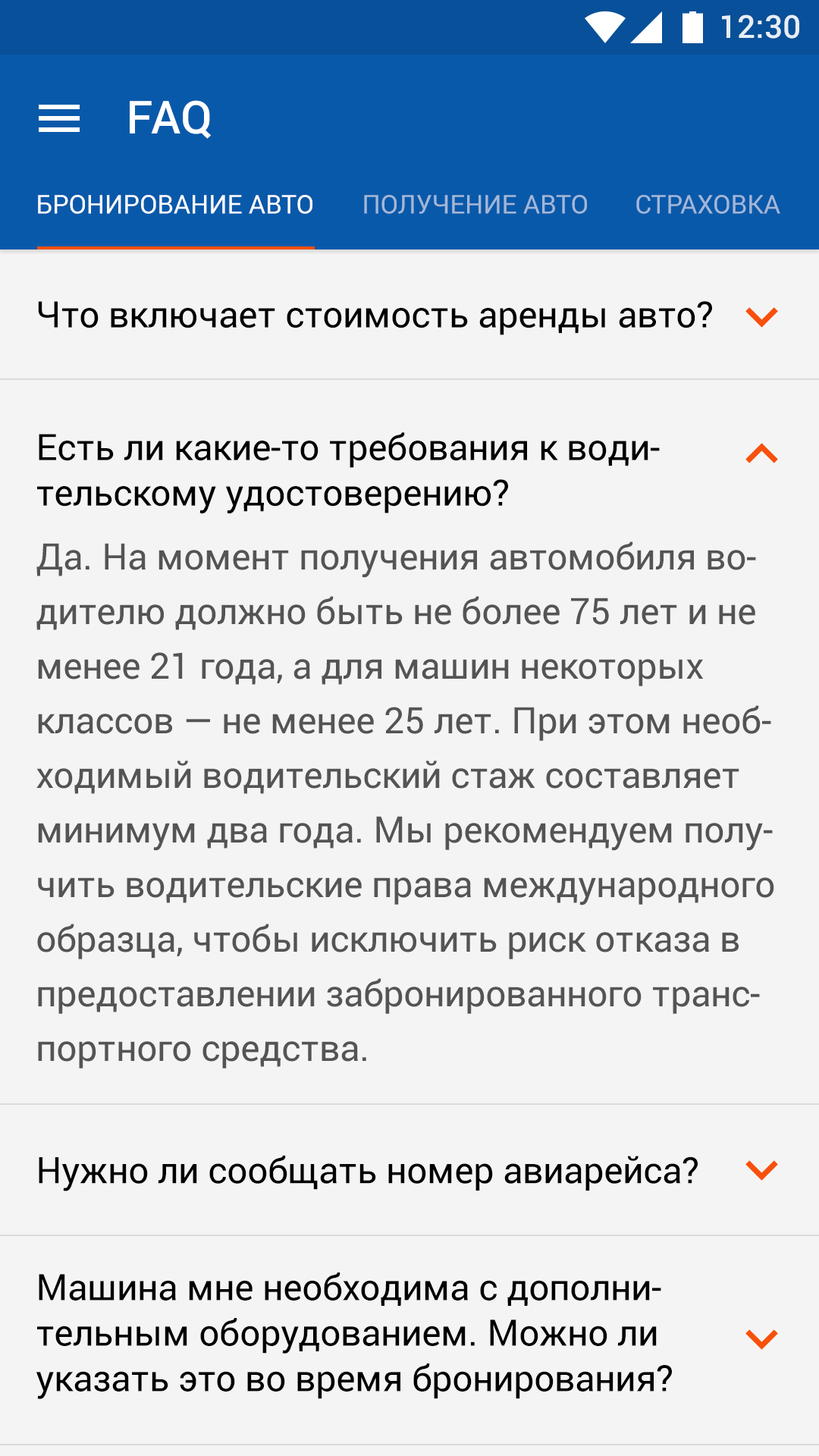
<style>
.page{position:relative;width:819px;height:1456px;background:#f4f4f4}
.page>*{position:absolute;margin:0}
.t1{font:31.8px "Roboto-Medium";color:#e7eef5}
.t2{font:45.5px "Roboto-Medium";color:#ffffff}
.t3{font:25.8px "Roboto-Regular";color:#ffffff;text-transform:uppercase}
.t4{font:25.8px "Roboto-Regular";color:#a2b7d7;text-transform:uppercase}
.t5{font:36.4px "Roboto-Regular";color:#000000}
.t6{font:36.4px/45.5px "Roboto-Regular";color:#000000}
.t7{font:36.4px/54.6px "Roboto-Regular";color:#545454}
</style>
<div class="page">
<p class="t1" style="left:722px;top:14px;width:77px;height:25px">12:30</p>
<p class="t2" style="left:130px;top:100px;width:81px;height:39px">FAQ</p>
<p class="t3" style="left:38px;top:195px;width:274px;height:19px">БРОНИРОВАНИЕ АВТО</p>
<p class="t4" style="left:364px;top:195px;width:223px;height:19px">ПОЛУЧЕНИЕ АВТО</p>
<p class="t4" style="left:636px;top:195px;width:144px;height:19px">СТРАХОВКА</p>
<p class="t5" style="left:38px;top:301px;width:674px;height:34px">Что включает стоимость аренды авто?</p>
<p class="t6" style="left:37px;top:432px;width:623px;height:81px">Есть ли какие-то требования к водительскому удостоверению?</p>
<p class="t7" style="left:36px;top:541px;width:738px;height:527px">Да. На момент получения автомобиля водителю должно быть не более 75 лет и не менее 21 года, а для машин некоторых классов — не менее 25 лет. При этом необходимый водительский стаж составляет минимум два года. Мы рекомендуем получить водительские права международного образца, чтобы исключить риск отказа в предоставлении забронированного транспортного средства.</p>
<p class="t5" style="left:39px;top:1155px;width:659px;height:36px">Нужно ли сообщать номер авиарейса?</p>
<p class="t6" style="left:36px;top:1272px;width:636px;height:127px">Машина мне необходима с дополнительным оборудованием. Можно ли указать это во время бронирования?</p>
</div>
